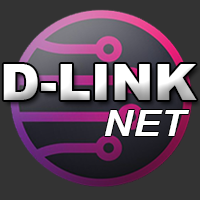
<style>
.page{position:relative;width:200px;height:200px;background:#333333}
.page>*{position:absolute;margin:0}
.t1{font:50.1px "Arial-Black";color:#ffffff}
.t2{font:35.9px "Arial-BoldItalicMT";color:#ffffff;scale:1.15 1}
</style>
<div class="page">
<p class="t1" style="left:3px;top:64px;width:194px;height:36px">D-LINK</p>
<p class="t2" style="left:104px;top:110px;width:86px;height:26px">NET</p>
</div>
